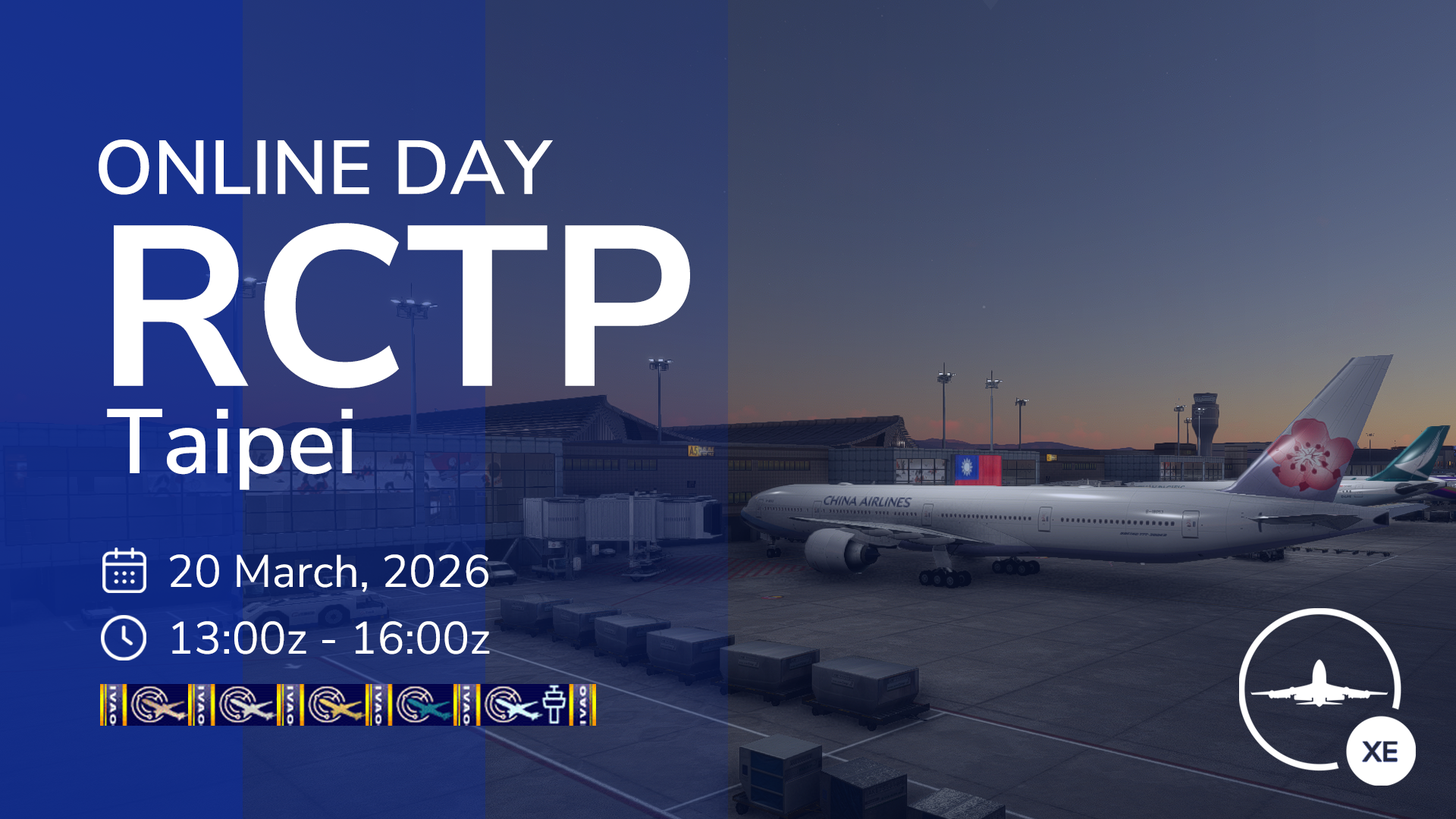
<style>
.page{position:relative;width:1456px;height:819px}
.page>*{position:absolute;margin:0}
.t1{font:75.8px "NunitoSans-SemiBold";color:#ffffff}
.t2{font:227.4px "NunitoSans-Bold";color:#ffffff}
.t3{font:90.9px "NunitoSans-SemiBold";color:#ffffff}
.t4{font:45.5px "NunitoSans-Regular";color:#ffffff}
</style>
<div class="page">
<p class="t1" style="left:99px;top:140px;width:454px;height:55px">ONLINE DAY</p>
<p class="t2" style="left:114px;top:223px;width:576px;height:165px">RCTP</p>
<p class="t3" style="left:107px;top:409px;width:246px;height:81px">Taipei</p>
<p class="t4" style="left:169px;top:554px;width:319px;height:38px">20 March, 2026</p>
<p class="t4" style="left:172px;top:621px;width:318px;height:33px">13:00z - 16:00z</p>
</div>
